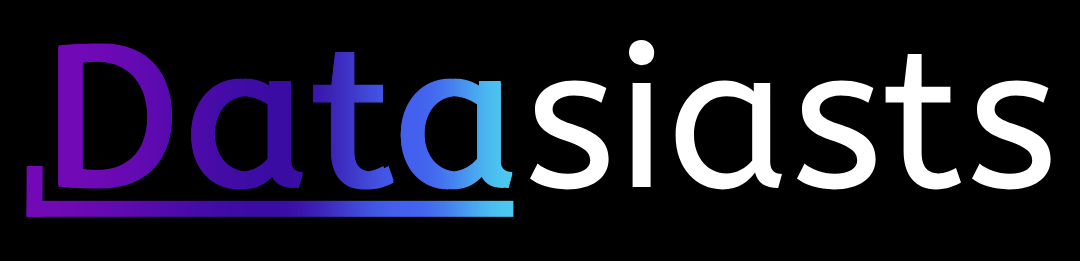
<style>
.page{position:relative;width:1080px;height:261px;background:#000000}
.page>*{position:absolute;margin:0}
.t1{font:200px "ABeeZee-Regular";color:#ffffff}
.t2{font:200px "ABeeZee-Regular";font-weight:bold}
</style>
<div class="page">
<p class="t1" style="left:530px;top:40px;width:521px;height:150px">siasts</p>
<p class="t2" style="left:58px;top:45px;width:455px;height:145px">Data</p>
</div>
